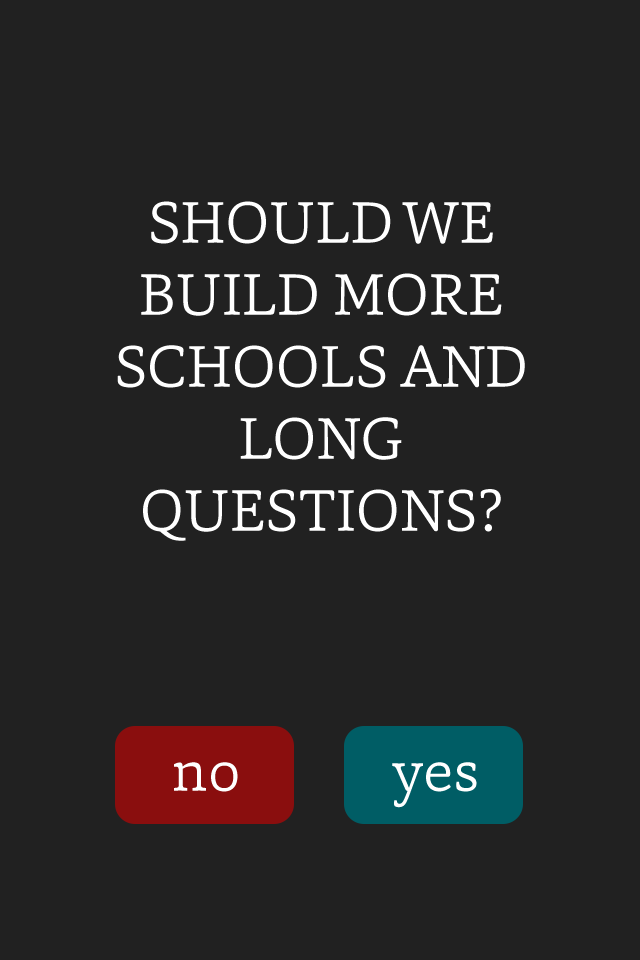
<style>
.page{position:relative;width:640px;height:960px;background:#212121}
.page>*{position:absolute;margin:0}
.t1{font:60px "Capita-Light";color:#ffffff;text-transform:uppercase}
.t2{font:60px "Capita-Light";color:#ffffff}
</style>
<div class="page">
<p class="t1" style="left:117px;top:201px;width:408px;height:340px;text-align:center">Should we build more schools AND LONG QUESTIONS?</p>
<p class="t2" style="left:174px;top:762px;width:64px;height:30px">no</p>
<p class="t2" style="left:392px;top:762px;width:85px;height:46px">yes</p>
</div>
